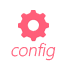
<style>
.page{position:relative;width:67px;height:70px;background:#ffffff}
.page>*{position:absolute;margin:0}
.t1{font:17.3px "SegoeUI-Light";color:#ff5e79;font-style:italic}
</style>
<div class="page">
<p class="t1" style="left:11px;top:42px;width:45px;height:19px">config</p>
</div>
